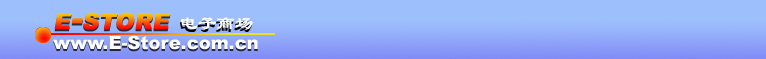
<style>
.page{position:relative;width:766px;height:59px;background:#9dbffc}
.page>*{position:absolute;margin:0}
.t1{font:32px "Arial-Black";font-variant:small-caps;font-weight:bold;font-style:italic}
.t2{font:18px "LiSu";color:#ffffff;font-weight:bold}
.t3{font:18px "Arial-Black";color:#ffffff;font-variant:small-caps;font-weight:bold;font-style:italic}
.t4{font:18px "Arial-Black";color:#ffffff}
.t5{font:18px "Arial-Black";color:#ffffff;text-transform:uppercase}
</style>
<div class="page">
<p class="t1" style="left:54px;top:12px;width:117px;height:18px">e-store</p>
<p class="t2" style="left:181px;top:17px;width:72px;height:12px"><span class="t3"> </span>电子商场</p>
<p class="t4" style="left:53px;top:35px;width:205px;height:15px">www.<span class="t5">e</span>-<span class="t5">s</span>tore.com.cn</p>
</div>
